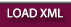
<style>
.page{position:relative;width:71px;height:27px;background:#730b3f}
.page>*{position:absolute;margin:0}
.t1{font:12.5px "MyriadPro-Regular";color:#ffffff}
</style>
<div class="page">
<p class="t1" style="left:7px;top:8px;width:56px;height:10px">LOAD XML</p>
</div>
